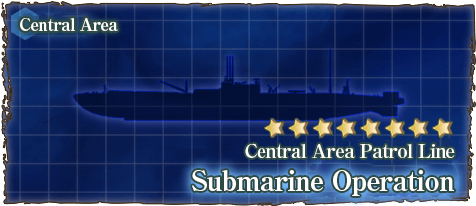
<style>
.page{position:relative;width:476px;height:206px}
.page>*{position:absolute;margin:0}
.t1{font:17px "RyuminPro-ExBold";letter-spacing:-0.04em;color:#ffffff}
.t2{font:19px "RyuminPro-ExBold";letter-spacing:-0.04em;color:#ffffff}
.t3{font:28px "RyuminPro-ExBold";letter-spacing:-0.04em;color:#ffffff}
</style>
<div class="page">
<p class="t1" style="left:20px;top:18px;width:98px;height:13px">Central Area</p>
<p class="t2" style="left:245px;top:143px;width:210px;height:15px">Central Area Patrol Line</p>
<p class="t3" style="left:192px;top:170px;width:262px;height:26px">Submarine Operation</p>
</div>
